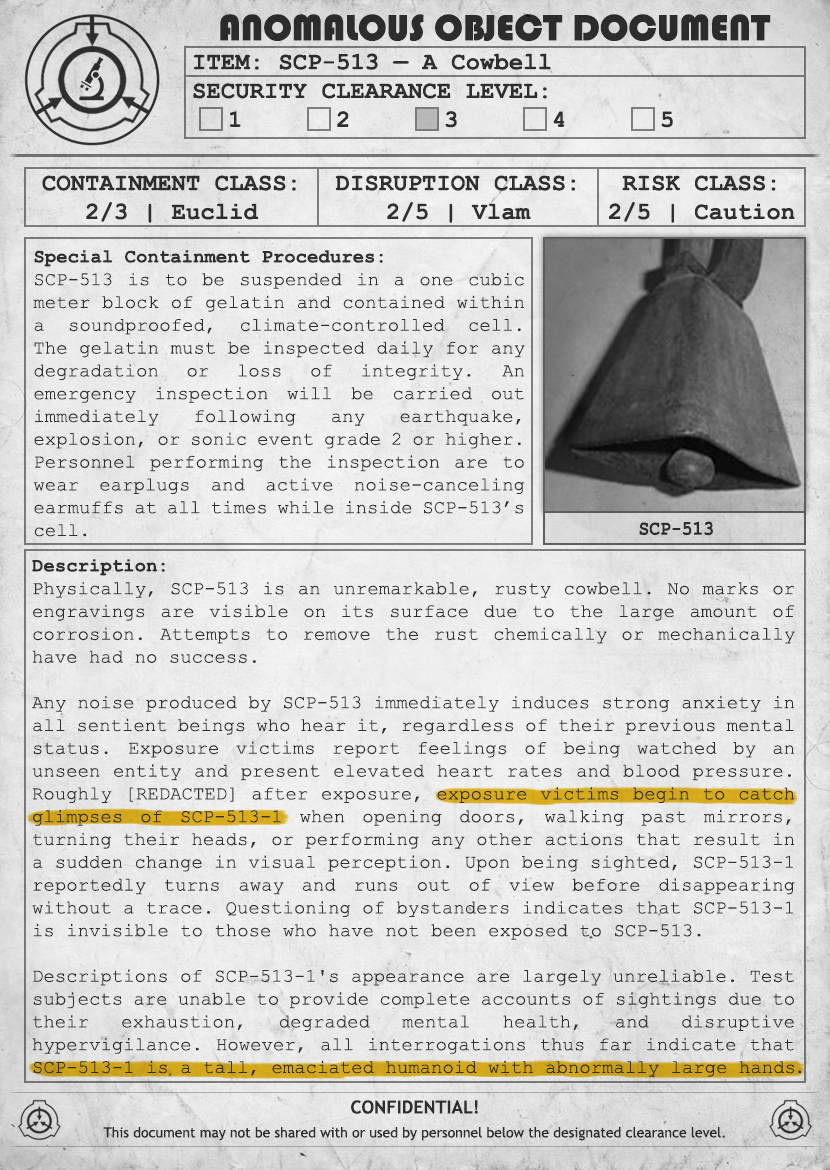
<style>
.page{position:relative;width:830px;height:1170px}
.page>*{position:absolute;margin:0}
.t1{font:38px "Bauhaus93";color:#333333;text-transform:uppercase}
.t2{font:24px "CourierNewPS-BoldMT";color:#333333}
.t3{font:24px "CourierNewPS-BoldMT";color:#333333;text-transform:uppercase}
.t4{font:19px "CourierNewPSMT";color:#333333}
.t5{font:19px "CourierNewPS-BoldMT";color:#333333}
.t6{font:20.1px "CourierNewPS-BoldMT";color:#333333;scale:0.9 1}
.t7{font:19px "CourierNewPSMT";letter-spacing:-0.1em;color:#333333}
.t8{font:14px/24px "TrebuchetMS";color:#333333}
.t9{font:18px/24px "TrebuchetMS-Bold";color:#333333}
</style>
<div class="page">
<p class="t1" style="left:220px;top:14px;width:551px;height:27px">anomalous object document</p>
<p class="t2" style="left:193px;top:53px;width:480px;height:75px">ITEM: SCP-513 — A Cowbell<br><span class="t3">Security CLEARANCE LEVEL:</span> <br> 1   2   3   4   5</p>
<p class="t2" style="left:42px;top:175px;width:254px;height:48px;text-align:center">CONTAINMENT CLASS:<br>2/3 | Euclid</p>
<p class="t2" style="left:335px;top:175px;width:241px;height:48px;text-align:center">DISRUPTION CLASS:<br>2/5 | Vlam</p>
<p class="t2" style="left:609px;top:175px;width:186px;height:48px;text-align:center">RISK CLASS:<br>2/5 | Caution</p>
<p class="t4" style="left:33px;top:250px;width:492px;height:287px;text-align:justify"><span class="t5">Special Containment Procedures:<br></span>SCP-513 is to be suspended in a one cubic meter block of gelatin and contained within a soundproofed, climate-controlled cell. The gelatin must be inspected daily for any degradation or loss of integrity. An emergency inspection will be carried out immediately following any earthquake, explosion, or sonic event grade 2 or higher. Personnel performing the inspection are to wear earplugs and active noise-canceling earmuffs at all times while inside SCP-513’s cell.</p>
<p class="t6" style="left:639px;top:521px;width:74px;height:15px">SCP-513</p>
<p class="t4" style="left:32px;top:559px;width:770px;height:518px;text-align:justify"><span class="t5">Description:<br></span>Physically, SCP-513 is an unremarkable, rusty cowbell. No marks or engravings are visible on its surface due to the large amount of corrosion. Attempts to remove the rust chemically or mechanically have had no success.<br><br>Any noise produced by SCP-513 immediately induces strong anxiety in all sentient beings who hear it, regardless of their previous mental status. Exposure victims report feelings of being watched by an unseen entity and present elevated heart rates and blood pressure. Roughly [REDACTED] after exposure, exposure victims begin to catch glimpses of SCP-513-1 when opening doors, walking past mirrors, turning their heads, or performing any other actions that result in a sudden change in visual perception. Upon being sighted, SCP-513-1 reportedly turns away and runs out of view before disappearing without a trace. Questioning of bystanders indicates that SCP-513-1 is invisible to those who have not been exposed to SCP-513.<br><br>Descriptions of SCP-513-1's appearance are largely unreliable. Test subjects are unable to provide complete accounts of sightings due to their exhaustion, degraded mental health, and disruptive hypervigilance. However, all interrogations thus far indicate that SCP-513-1 is a tall, emaciated humanoid with abnormally large hand<span class="t7">s.</span></p>
<p class="t8" style="left:103px;top:1100px;width:622px;height:41px;text-align:center"><span class="t9">CONFIDENTIAL!<br></span>This document may not be shared with or used by personnel below the designated clearance level.</p>
</div>
